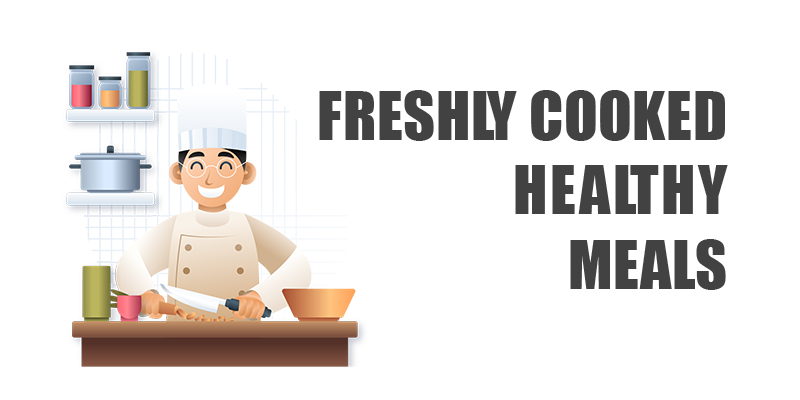
<style>
.page{position:relative;width:800px;height:400px;background:#ffffff}
.page>*{position:absolute;margin:0}
.t1{font:62px "Impact";letter-spacing:0.01em;color:#424242}
.t2{font:62px "Impact";letter-spacing:0.04em;color:#424242}
</style>
<div class="page">
<p class="t1" style="left:319px;top:90px;width:409px;height:200px;text-align:right">FRESHLY COOKED<br><span class="t2">HEALTHY <br></span>MEALS</p>
</div>
